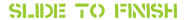
<style>
.page{position:relative;width:186px;height:20px;background:#ffffff}
.page>*{position:absolute;margin:0}
.t1{font:18px "Crass";color:#99cc33}
</style>
<div class="page">
<p class="t1" style="left:9px;top:3px;width:168px;height:15px">Slide To Finish</p>
</div>
